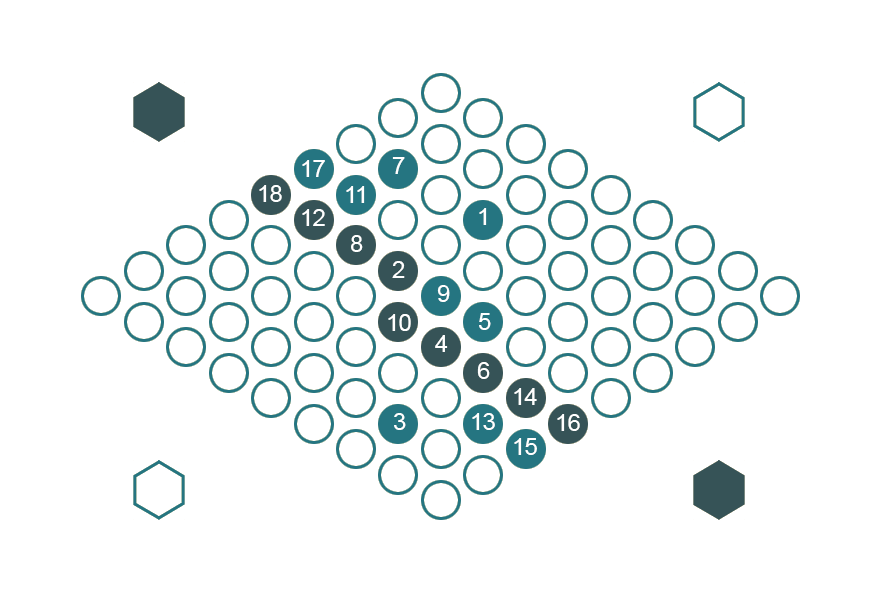
<style>
.page{position:relative;width:883px;height:590px;background:#ffffff}
.page>*{position:absolute;margin:0}
.t1{font:24px "ArialMT";letter-spacing:-0.025em;color:#ffffff}
</style>
<div class="page">
<p class="t1" style="left:302px;top:160px;width:23px;height:17px">17</p>
<p class="t1" style="left:392px;top:157px;width:13px;height:17px">7</p>
<p class="t1" style="left:259px;top:185px;width:23px;height:17px">18</p>
<p class="t1" style="left:346px;top:186px;width:19px;height:17px">11</p>
<p class="t1" style="left:302px;top:209px;width:23px;height:17px">12</p>
<p class="t1" style="left:479px;top:208px;width:8px;height:17px">1</p>
<p class="t1" style="left:351px;top:235px;width:12px;height:17px">8</p>
<p class="t1" style="left:392px;top:261px;width:13px;height:17px">2</p>
<p class="t1" style="left:437px;top:285px;width:13px;height:17px">9</p>
<p class="t1" style="left:388px;top:314px;width:23px;height:17px">10</p>
<p class="t1" style="left:479px;top:313px;width:12px;height:17px">5</p>
<p class="t1" style="left:435px;top:335px;width:13px;height:17px">4</p>
<p class="t1" style="left:477px;top:362px;width:13px;height:17px">6</p>
<p class="t1" style="left:514px;top:388px;width:23px;height:17px">14</p>
<p class="t1" style="left:394px;top:413px;width:12px;height:17px">3</p>
<p class="t1" style="left:472px;top:413px;width:23px;height:17px">13</p>
<p class="t1" style="left:557px;top:414px;width:23px;height:17px">16</p>
<p class="t1" style="left:514px;top:438px;width:23px;height:17px">15</p>
</div>
